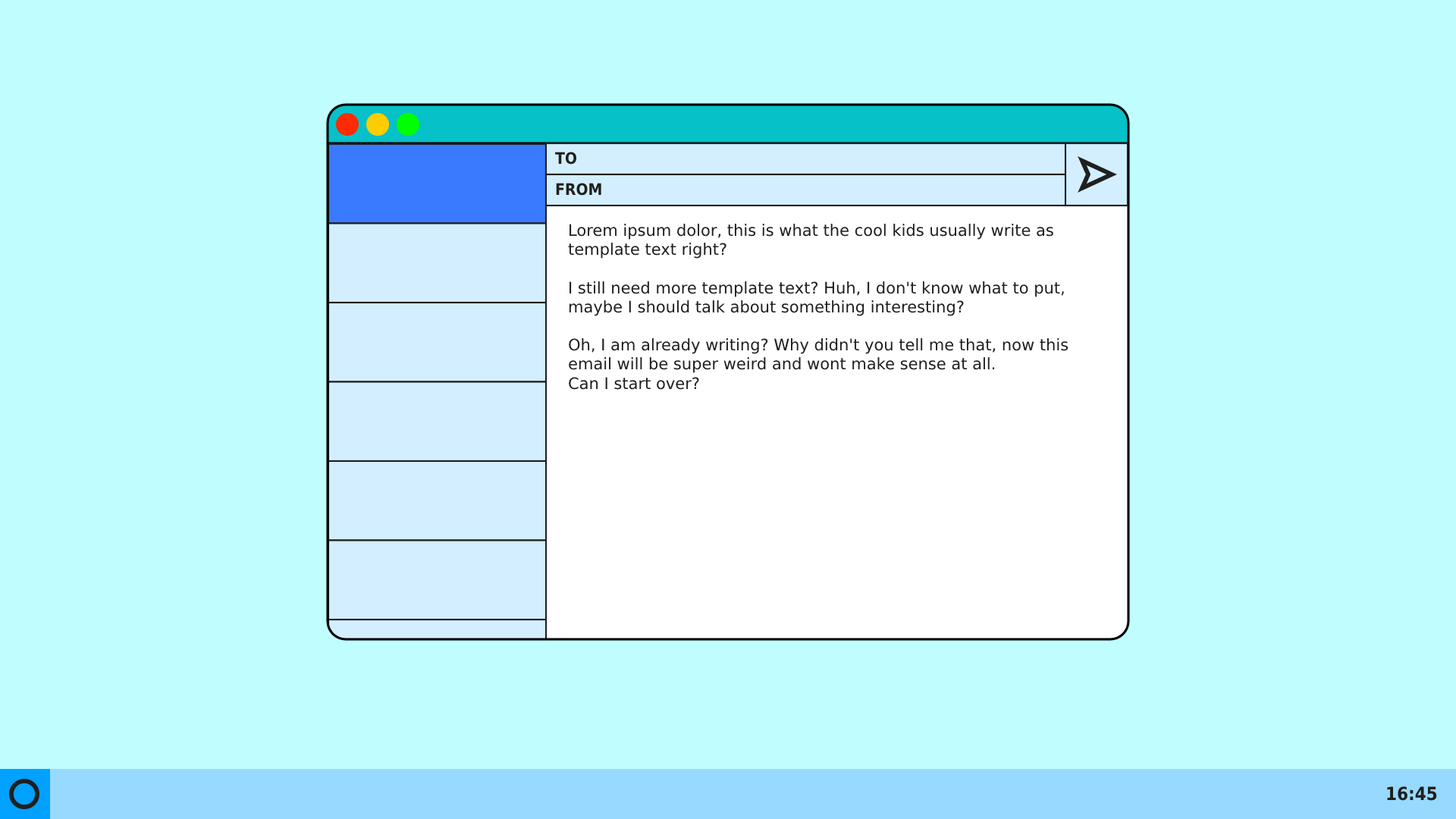
<style>
.page{position:relative;width:1456px;height:819px;background:#bffdff}
.page>*{position:absolute;margin:0}
.t1{font:15.9px "DejaVuSansCondensed-Bold";color:#1f1f1f}
.t2{font:15.9px "DejaVuSans";color:#1f1f1f}
.t3{font:18.2px "DejaVuSansCondensed-Bold";color:#1f1f1f}
</style>
<div class="page">
<p class="t1" style="left:555px;top:152px;width:22px;height:13px">TO</p>
<p class="t1" style="left:556px;top:183px;width:45px;height:13px">FROM</p>
<p class="t2" style="left:568px;top:224px;width:500px;height:166px">Lorem ipsum dolor, this is what the cool kids usually write as<br>template text right?<br><br>I still need more template text? Huh, I don't know what to put,<br>maybe I should talk about something interesting?<br><br>Oh, I am already writing? Why didn't you tell me that, now this<br>email will be super weird and wont make sense at all.<br>Can I start over?</p>
<p class="t3" style="left:1387px;top:786px;width:50px;height:15px">16:45</p>
</div>
